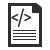
<style>
.page{position:relative;width:50px;height:50px;background:#ffffff}
.page>*{position:absolute;margin:0}
.t1{font:18.9px "FanwoodText";color:#2f2f2f;font-weight:bold;scale:0.71 1}
</style>
<div class="page">
<p class="t1" style="left:11px;top:8px;width:21px;height:19px">&lt;/&gt;</p>
</div>
